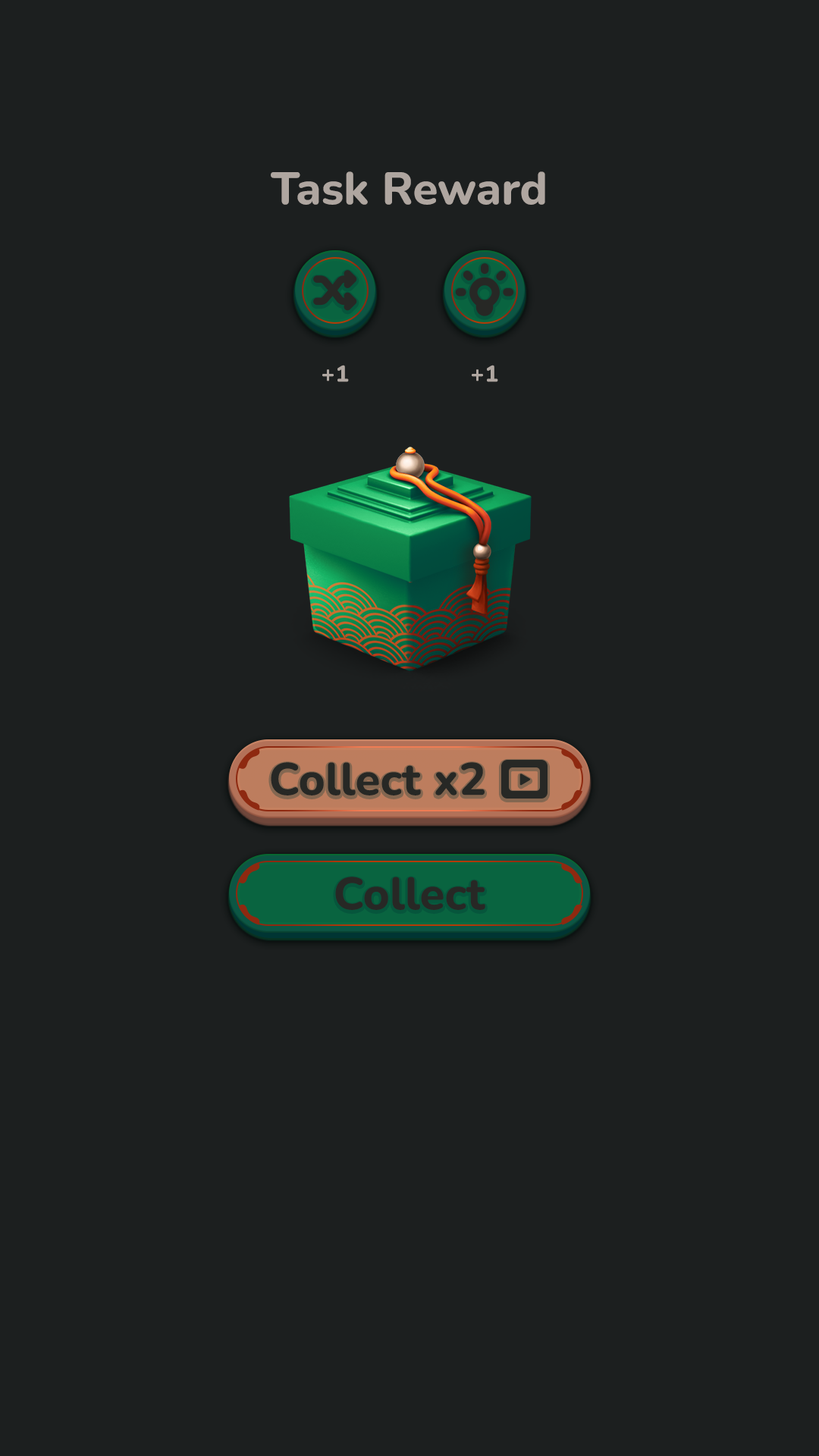
<style>
.page{position:relative;width:819px;height:1456px;background:#1c1f1f}
.page>*{position:absolute;margin:0}
.t1{font:45.5px "Nunito-ExtraBold";color:#afa6a0}
.t2{font:22.7px "Nunito-ExtraBold";letter-spacing:0.025em;color:#afa6a0}
.t3{font:45.5px "Nunito-ExtraBold";color:#272825}
</style>
<div class="page">
<p class="t1" style="left:271px;top:171px;width:274px;height:34px">Task Reward</p>
<p class="t2" style="left:322px;top:365px;width:27px;height:17px">+1</p>
<p class="t2" style="left:472px;top:365px;width:26px;height:17px">+1</p>
<p class="t3" style="left:271px;top:762px;width:150px;height:33px">Collect</p>
<p class="t3" style="left:435px;top:762px;width:50px;height:33px">x2</p>
<p class="t3" style="left:335px;top:877px;width:150px;height:33px">Collect</p>
</div>
